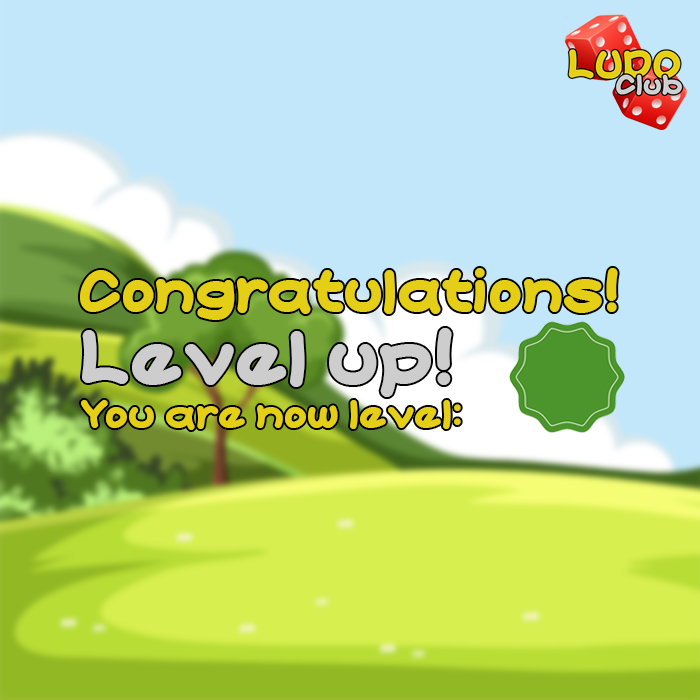
<style>
.page{position:relative;width:700px;height:700px;background:#c2e7fa}
.page>*{position:absolute;margin:0}
.t1{font:61px "CARTOONIC";color:#e5cf16}
.t2{font:80px "CARTOONIC";color:#cdcdcd}
.t3{font:42px "CARTOONIC";color:#e5cf16}
</style>
<div class="page">
<p class="t1" style="left:80px;top:268px;width:538px;height:52px">Congratulations!</p>
<p class="t2" style="left:82px;top:328px;width:370px;height:69px">Level up!</p>
<p class="t3" style="left:81px;top:400px;width:380px;height:30px">You are now level:</p>
</div>
